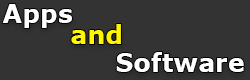
<style>
.page{position:relative;width:250px;height:80px;background:#333333}
.page>*{position:absolute;margin:0}
.t1{font:25.4px "Verdana-Bold";color:#ffffff}
.t2{font:25.4px "Verdana-Bold";color:#fff600}
</style>
<div class="page">
<p class="t1" style="left:2px;top:4px;width:70px;height:24px">Apps</p>
<p class="t2" style="left:71px;top:24px;width:50px;height:20px">and</p>
<p class="t1" style="left:116px;top:52px;width:128px;height:20px">Software</p>
</div>
